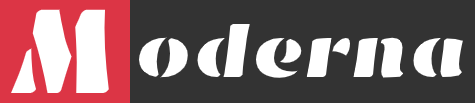
<style>
.page{position:relative;width:475px;height:103px;background:#333333}
.page>*{position:absolute;margin:0}
.t1{font:125.2px "EmblemaOne-Regular";color:#ffffff}
.t2{font:78.5px "EmblemaOne-Regular";color:#ffffff}
</style>
<div class="page">
<p class="t1" style="left:11px;top:9px;width:98px;height:84px">M</p>
<p class="t2" style="left:139px;top:24px;width:324px;height:54px">oderna</p>
</div>
